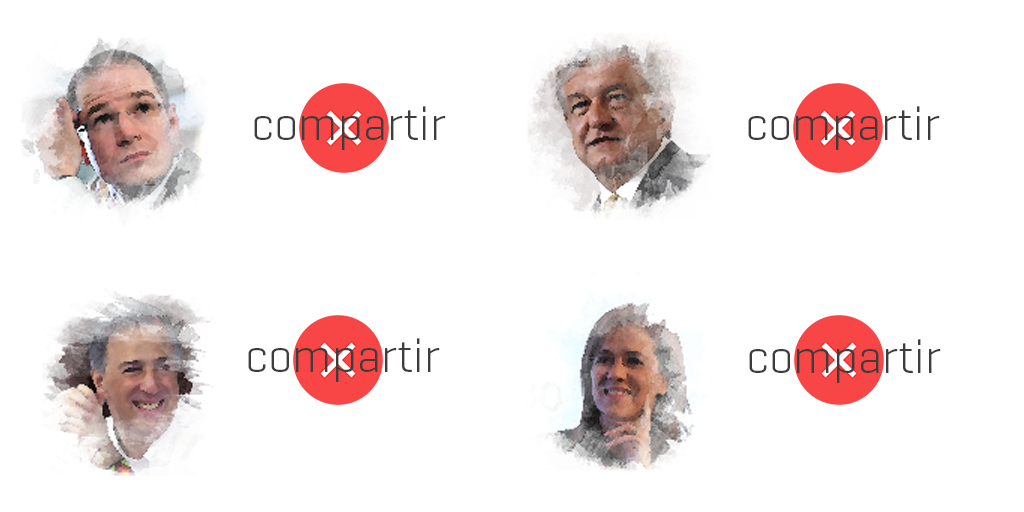
<style>
.page{position:relative;width:1024px;height:512px;background:#ffffff}
.page>*{position:absolute;margin:0}
.t1{font:48px "Geogrotesque-Light";color:#3d3d3d}
</style>
<div class="page">
<p class="t1" style="left:254px;top:106px;width:192px;height:44px">compartir</p>
<p class="t1" style="left:748px;top:106px;width:192px;height:44px">compartir</p>
<p class="t1" style="left:248px;top:338px;width:192px;height:44px">compartir</p>
<p class="t1" style="left:749px;top:339px;width:192px;height:44px">compartir</p>
</div>
